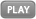
<style>
.page{position:relative;width:36px;height:19px}
.page>*{position:absolute;margin:0}
.t1{font:10px "MyriadPro-Regular";color:#ffffff;font-weight:bold}
</style>
<div class="page">
<p class="t1" style="left:7px;top:6px;width:23px;height:8px">PLAY</p>
</div>
